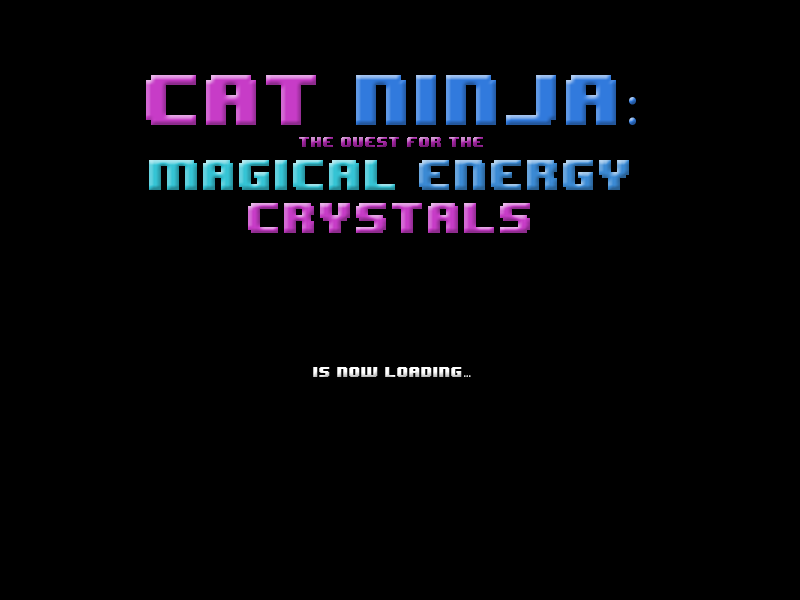
<style>
.page{position:relative;width:800px;height:600px;background:#000000}
.page>*{position:absolute;margin:0}
.t1{font:12px "8BITWONDERNominal"}
.t2{font:60px "8BITWONDERNominal"}
.t3{font:60px "MyriadPro-Regular"}
.t4{font:36px "8BITWONDERNominal"}
.t5{font:12px "MyriadPro-Regular"}
</style>
<div class="page">
<p class="t1" style="left:146px;top:75px;width:490px;height:302px;text-align:center"><span class="t2">Cat </span><span class="t2">Ninja</span><span class="t3">:<br><br></span>The quest for the<br><span class="t4">Magical </span><span class="t4">Energy</span><span class="t4"> Crystals<br><br><br><br></span>is now loading<span class="t5">...</span></p>
</div>
